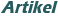
<style>
.page{position:relative;width:58px;height:16px;background:#ffffff}
.page>*{position:absolute;margin:0}
.t1{font:18.4px "ErasITC-Bold";color:#275c5f;scale:0.83 1}
</style>
<div class="page">
<p class="t1" style="left:1px;top:1px;width:57px;height:12px">Artikel</p>
</div>
